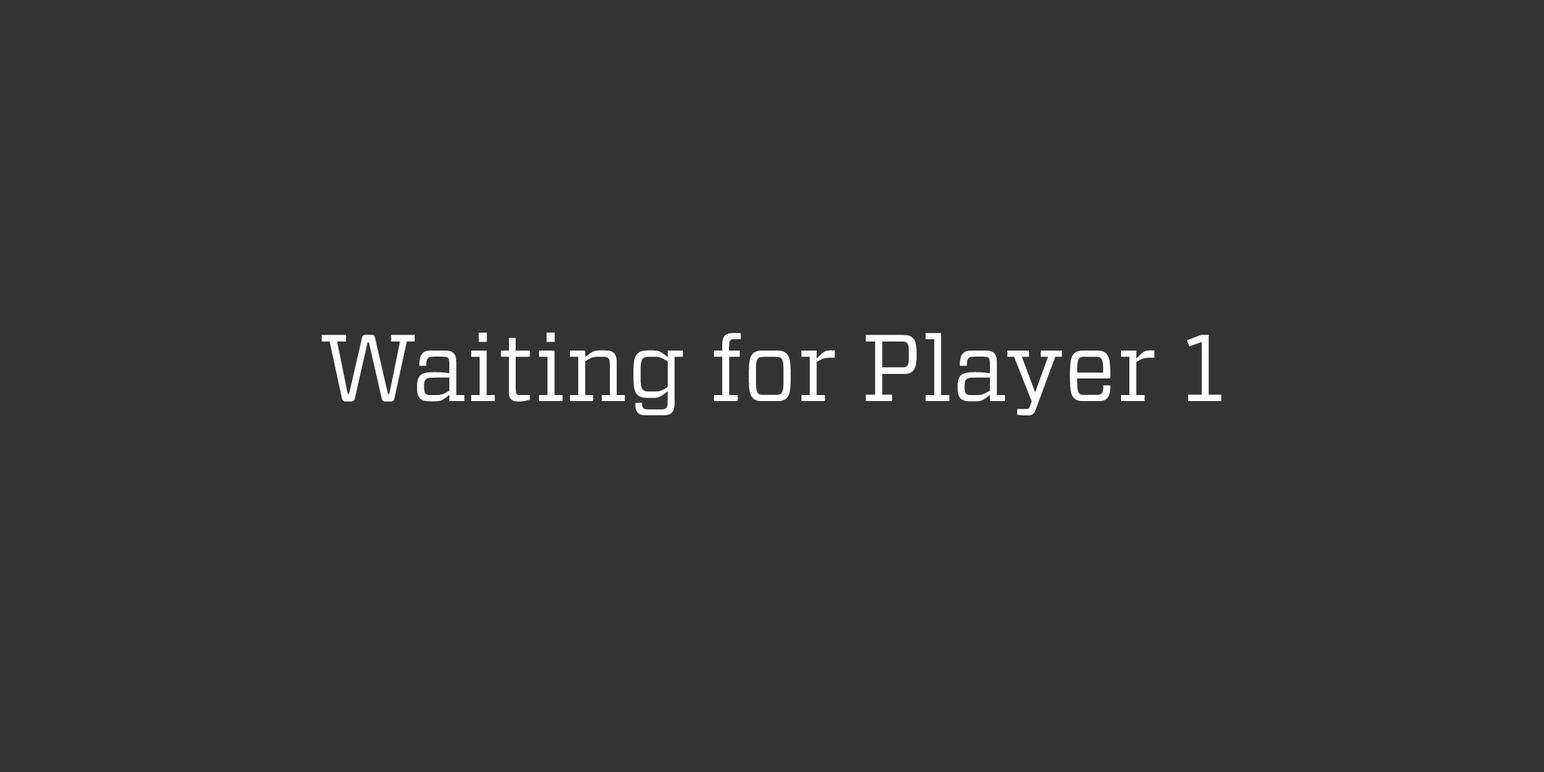
<style>
.page{position:relative;width:1544px;height:772px;background:#333333}
.page>*{position:absolute;margin:0}
.t1{font:94.3px "Vitesse-Book";color:#ffffff}
</style>
<div class="page">
<p class="t1" style="left:321px;top:333px;width:901px;height:82px">Waiting for Player 1</p>
</div>
